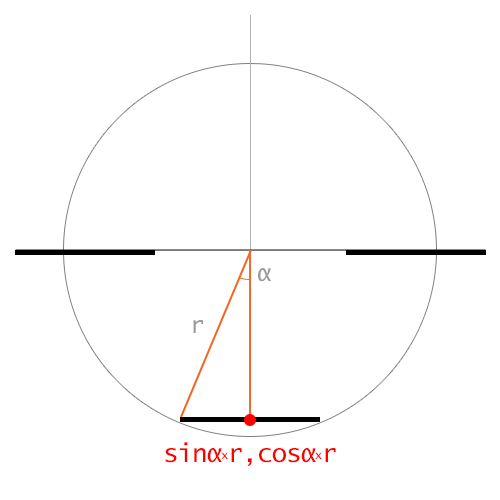
<style>
.page{position:relative;width:500px;height:500px;background:#ffffff}
.page>*{position:absolute;margin:0}
.t1{font:24px "LucidaConsole";letter-spacing:-0.05em;color:#999999}
.t2{font:24px "LucidaConsole";color:#999999}
.t3{font:25.8px "LucidaConsole";letter-spacing:-0.05em;color:#ff0000}
.t4{font:12px "LucidaConsole";letter-spacing:-0.05em;color:#ff0000}
</style>
<div class="page">
<p class="t1" style="left:258px;top:268px;width:14px;height:14px">α</p>
<p class="t2" style="left:193px;top:320px;width:10px;height:13px">r</p>
<p class="t3" style="left:165px;top:442px;width:171px;height:24px">sinα<span class="t4">x</span>r,cosα<span class="t4">x</span>r</p>
</div>
